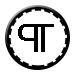
<style>
.page{position:relative;width:75px;height:75px;background:#ffffff}
.page>*{position:absolute;margin:0}
.t1{font:37.5px "MicrosoftSansSerif";letter-spacing:-0.06em;color:#000000}
</style>
<div class="page">
<p class="t1" style="left:18px;top:24px;width:20px;height:28px;rotate:180deg">P</p>
<p class="t1" style="left:32px;top:24px;width:22px;height:28px">T</p>
</div>
